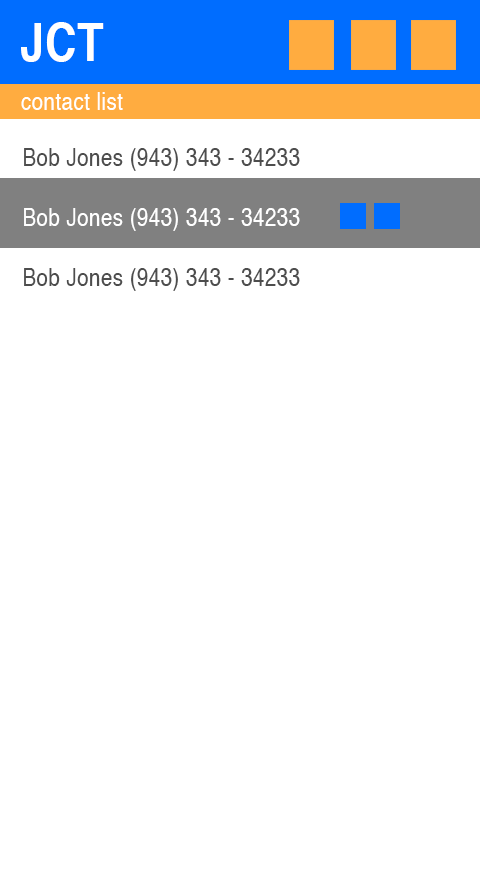
<style>
.page{position:relative;width:480px;height:869px;background:#ffffff}
.page>*{position:absolute;margin:0}
.t1{font:51.2px "Helvetica-Bold";letter-spacing:0.025em;color:#ffffff;scale:0.85 1}
.t2{font:24px "Helvetica";letter-spacing:0.025em;color:#ffffff;scale:0.85 1}
.t3{font:24px "Helvetica";letter-spacing:0.025em;color:#4c4c4c;scale:0.85 1}
</style>
<div class="page">
<p class="t1" style="left:21px;top:22px;width:83px;height:40px">JCT</p>
<p class="t2" style="left:21px;top:92px;width:102px;height:18px">contact list</p>
<p class="t3" style="left:24px;top:148px;width:276px;height:23px">Bob Jones (943) 343 - 34233</p>
<p class="t2" style="left:24px;top:208px;width:276px;height:23px">Bob Jones (943) 343 - 34233</p>
<p class="t3" style="left:24px;top:268px;width:276px;height:23px">Bob Jones (943) 343 - 34233</p>
</div>
